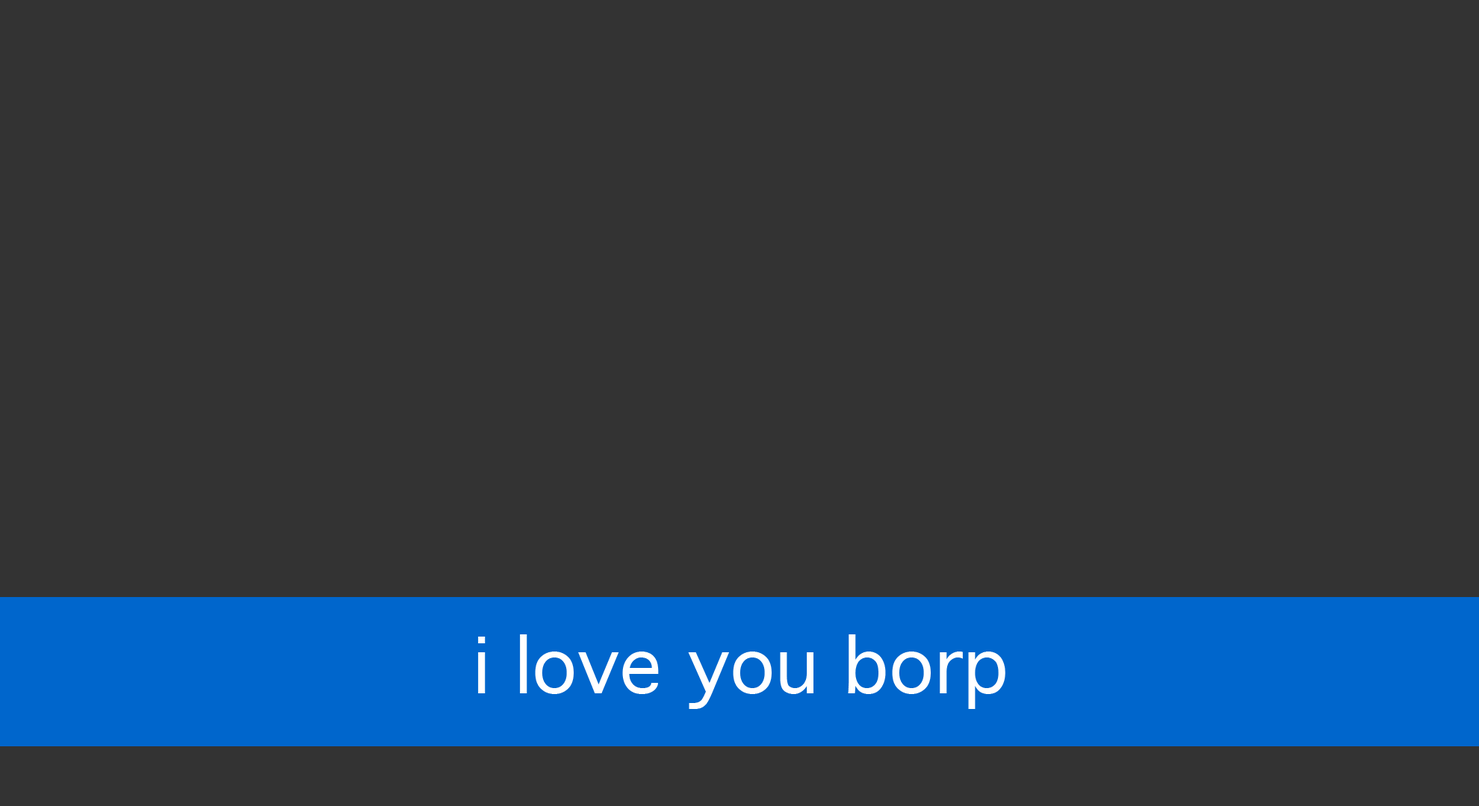
<style>
.page{position:relative;width:1479px;height:806px;background:#333333}
.page>*{position:absolute;margin:0}
.t1{font:74.7px "Geneva";color:#ffffff}
</style>
<div class="page">
<p class="t1" style="left:478px;top:635px;width:527px;height:74px">i love you borp</p>
</div>
